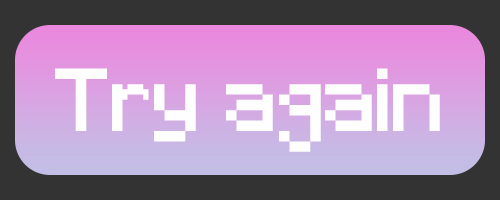
<style>
.page{position:relative;width:500px;height:200px;background:#333333}
.page>*{position:absolute;margin:0}
.t1{font:83.3px "Minecraft";color:#fefefe}
</style>
<div class="page">
<p class="t1" style="left:55px;top:68px;width:385px;height:84px">Try again</p>
</div>
